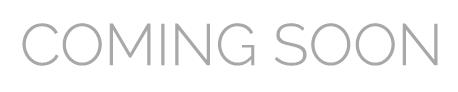
<style>
.page{position:relative;width:458px;height:92px;background:#ffffff}
.page>*{position:absolute;margin:0}
.t1{font:58.4px "Raleway-Light";color:#a9a8a8}
</style>
<div class="page">
<p class="t1" style="left:22px;top:23px;width:416px;height:43px">COMING SOON</p>
</div>
